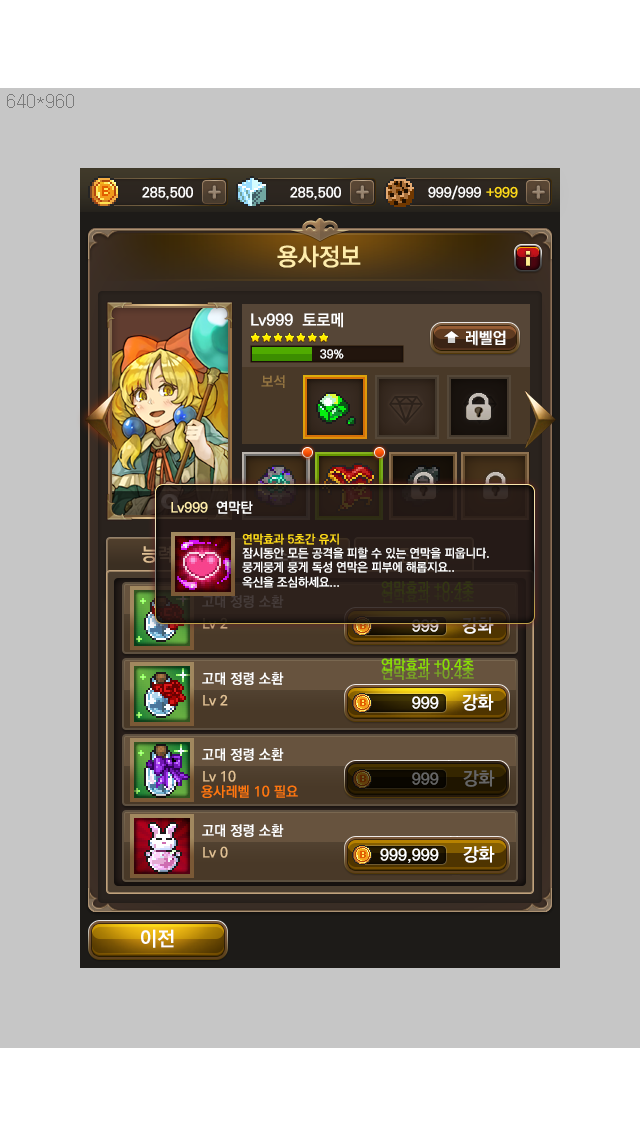
<style>
.page{position:relative;width:640px;height:1136px;background:#c6c6c6}
.page>*{position:absolute;margin:0}
.t1{font:24px "KoPubDotumBold";color:#ffedab}
.t2{font:14px "KoPubDotumBold";color:#ffedab}
.t3{font:14px "KoPubDotumBold";color:#ffffff}
.t4{font:12px "KoPubDotumBold";color:#ffffff}
.t5{font:12px "KoPubDotumBold";color:#ffdc18}
.t6{font:14px "KoPubDotumBold";color:#333713}
.t7{font:14px "KoPubDotumBold";color:#312e18}
.t8{font:14px "KoPubDotumBold";color:#453b39}
.t9{font:14px "KoPubDotumBold"}
.t10{font:18px "KoPubDotumBold"}
.t11{font:16px "KoPubDotumBold"}
.t12{font:14px "KoPubDotumBold";color:#89e001}
.t13{font:14px "KoPubDotumBold";color:#79a324}
.t14{font:14px "KoPubDotumBold";color:#e0c093}
.t15{font:16px "KoPubDotumBold";color:#ffffff}
.t16{font:18px "KoPubDotumBold";color:#ffffff}
.t17{font:14px "KoPubDotumBold";color:#fe770d}
.t18{font:20px "KoPubDotumBold";color:#ffffff}
</style>
<div class="page">
<p class="t1" style="left:277px;top:245px;width:84px;height:23px">용사정보</p>
<p class="t2" style="left:171px;top:501px;width:82px;height:13px">Lv999<span class="t3">  연막탄</span></p>
<p class="t4" style="left:242px;top:533px;width:247px;height:55px"><span class="t5">연막효과 5초간 유지<br></span>잠시동안 모든 공격을 피할 수 있는 연막을 피웁니다.  <br>뭉게뭉게 뭉게 독성 연막은 피부에 해롭지요..<br>옥신을 조심하세요...</p>
<p class="t6" style="left:381px;top:581px;width:93px;height:13px">연막효과 +0.4초</p>
<p class="t7" style="left:381px;top:590px;width:93px;height:13px">연막효과 +0.4초</p>
<p class="t8" style="left:202px;top:595px;width:82px;height:13px">고대 정령 소환</p>
<p class="t9" style="left:203px;top:617px;width:25px;height:12px">Lv 2</p>
<p class="t10" style="left:462px;top:617px;width:32px;height:17px">강화</p>
<p class="t11" style="left:412px;top:619px;width:27px;height:13px">999</p>
<p class="t12" style="left:381px;top:658px;width:93px;height:13px">연막효과 +0.4초</p>
<p class="t3" style="left:202px;top:672px;width:82px;height:13px">고대 정령 소환</p>
<p class="t13" style="left:381px;top:667px;width:93px;height:13px">연막효과 +0.4초</p>
<p class="t14" style="left:203px;top:694px;width:25px;height:12px">Lv 2</p>
<p class="t15" style="left:412px;top:696px;width:27px;height:13px">999</p>
<p class="t16" style="left:462px;top:694px;width:32px;height:17px">강화</p>
<p class="t3" style="left:202px;top:748px;width:82px;height:13px">고대 정령 소환</p>
<p class="t14" style="left:203px;top:770px;width:33px;height:12px">Lv 10</p>
<p class="t17" style="left:201px;top:785px;width:97px;height:13px">용사레벨 10 필요</p>
<p class="t3" style="left:202px;top:824px;width:82px;height:13px">고대 정령 소환</p>
<p class="t14" style="left:203px;top:846px;width:25px;height:12px">Lv 0</p>
<p class="t18" style="left:141px;top:929px;width:33px;height:19px">이전</p>
</div>
